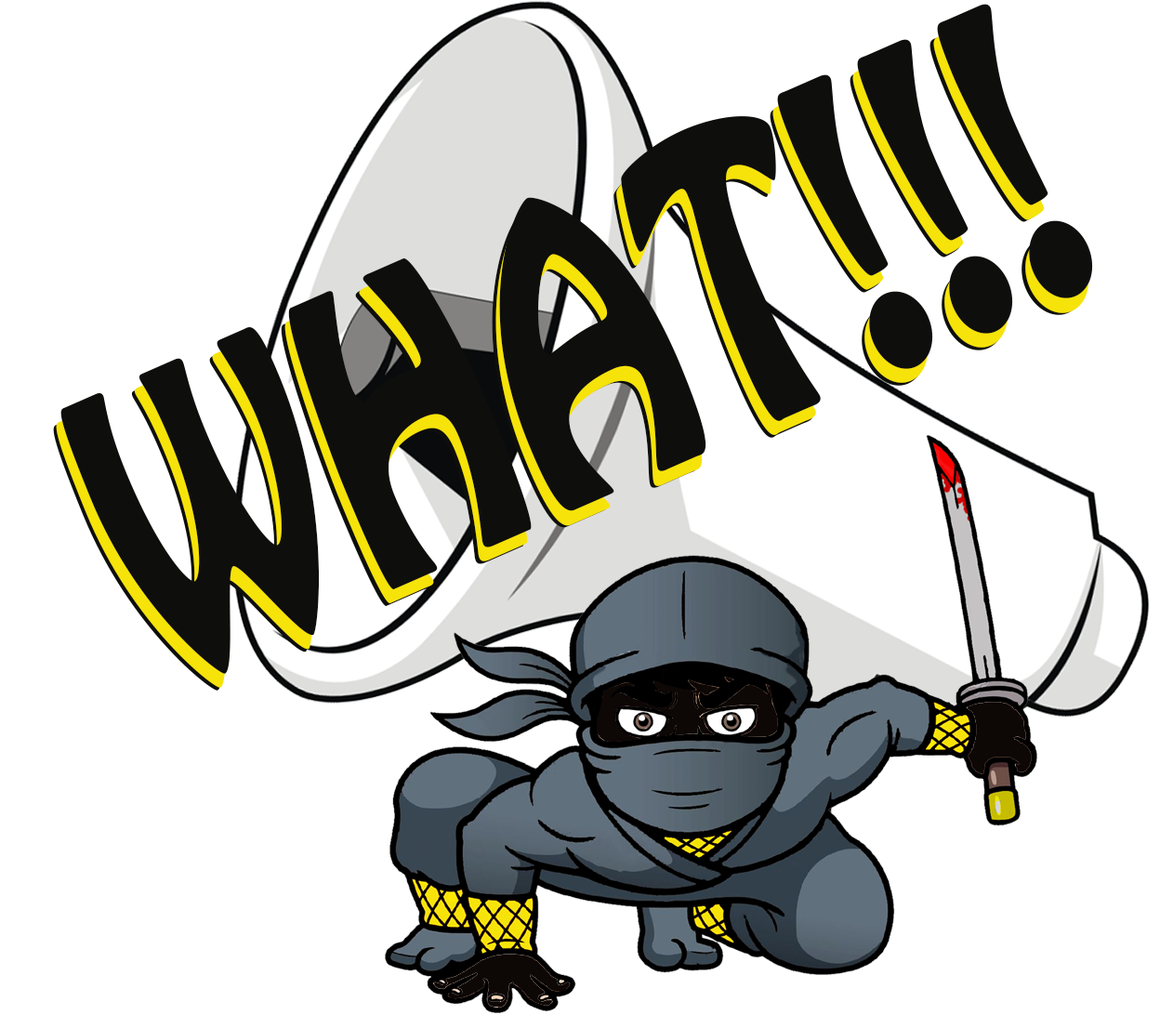
<style>
.page{position:relative;width:1160px;height:1028px;background:#ffffff}
.page>*{position:absolute;margin:0}
.t1{font:359.6px "HoboStd";color:#0e0e0c;scale:0.75 1}
</style>
<div class="page">
<p class="t1" style="left:60px;top:4px;width:1033px;height:670px;rotate:-24deg">WHAT!!!</p>
<p class="t1" style="left:53px;top:20px;width:1033px;height:671px;rotate:-24deg">WHAT!!!</p>
<p class="t1" style="left:56px;top:19px;width:1033px;height:669px;rotate:-24deg">WHAT!!!!!</p>
</div>
